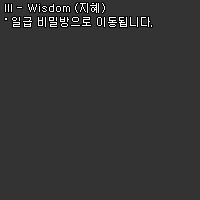
<style>
.page{position:relative;width:200px;height:200px;background:#333333}
.page>*{position:absolute;margin:0}
.t1{font:11px/14px "Dotum";color:#ffffff}
</style>
<div class="page">
<p class="t1" style="left:5px;top:3px;width:147px;height:24px">III - Wisdom (지혜)<br>˚ 일급 비밀방으로 이동됩니다.</p>
</div>
